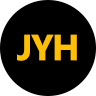
<style>
.page{position:relative;width:96px;height:96px;background:#000000}
.page>*{position:absolute;margin:0}
.t1{font:36px "MicrosoftPhagsPa-Bold";letter-spacing:-0.025em;color:#febf00}
</style>
<div class="page">
<p class="t1" style="left:17px;top:34px;width:60px;height:27px">JYH</p>
</div>
